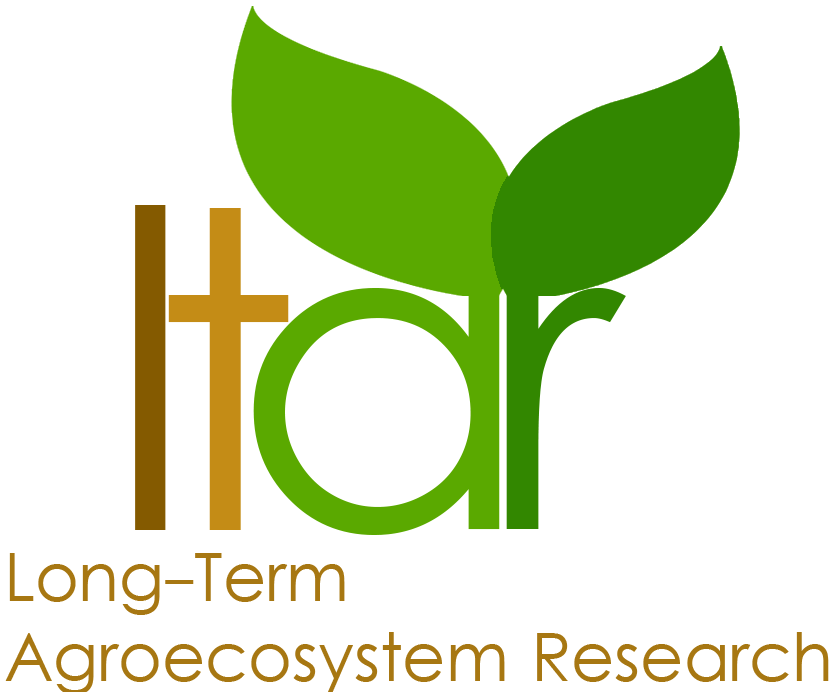
<style>
.page{position:relative;width:838px;height:692px;background:#ffffff}
.page>*{position:absolute;margin:0}
.t1{font:441.9px "LevenimMT";color:#845a00}
.t2{font:441.9px "LevenimMT";color:#c48c16}
.t3{font:441.9px "LevenimMT";color:#5aa900}
.t4{font:441.9px "LevenimMT";color:#328700}
.t5{font:66.7px "LevenimMT";color:#a77712}
</style>
<div class="page">
<p class="t1" style="left:135px;top:205px;width:31px;height:325px">l</p>
<p class="t2" style="left:168px;top:208px;width:121px;height:322px">t</p>
<p class="t3" style="left:253px;top:288px;width:247px;height:247px">a</p>
<p class="t4" style="left:506px;top:288px;width:120px;height:241px">r</p>
<p class="t5" style="left:5px;top:553px;width:824px;height:139px">Long-Term <br>Agroecosystem Research</p>
</div>
